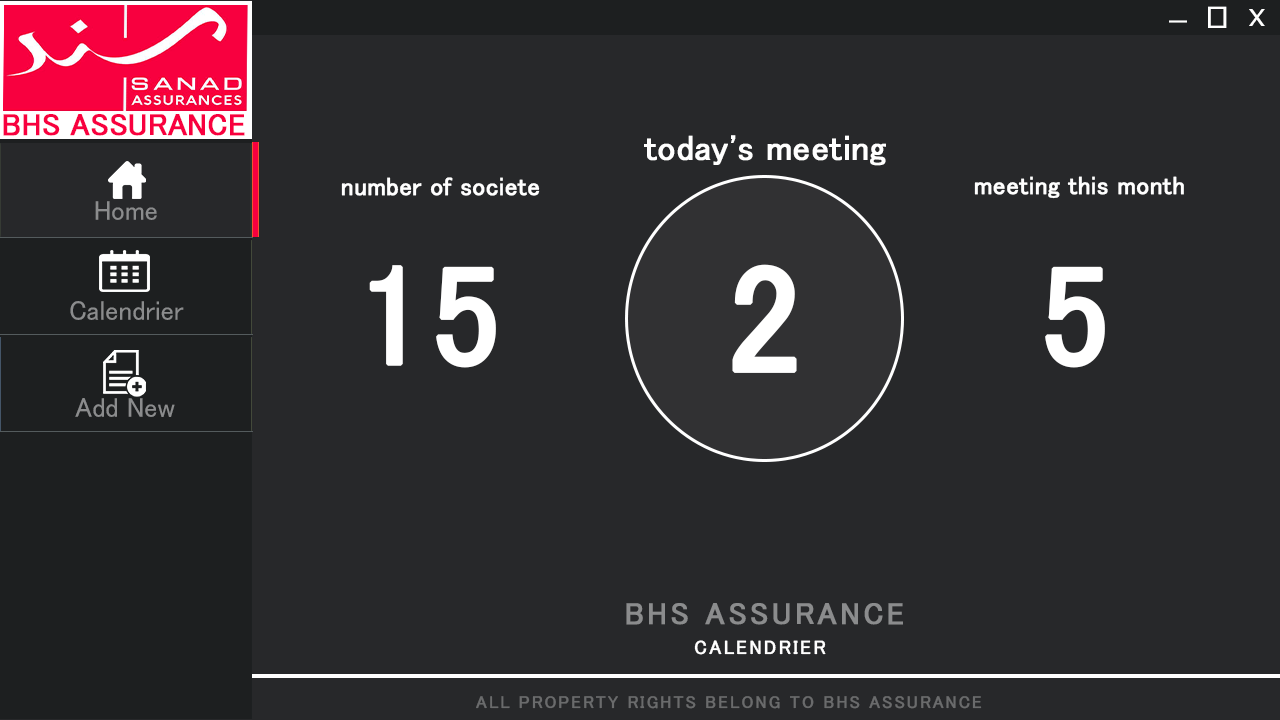
<style>
.page{position:relative;width:1280px;height:720px;background:#27282a}
.page>*{position:absolute;margin:0}
.t1{font:31px "HoloLensMDL2Assets";color:#ffffff;scale:1.21 1}
.t2{font:30px "Verdana";color:#ffffff}
.t3{font:30.6px "KozGoPr6N-Regular";color:#ffffff;font-weight:bold}
.t4{font:30.6px "MS-PGothic";color:#f8003f;font-weight:bold}
.t5{font:35.7px "MS-PGothic";color:#ffffff;font-weight:bold}
.t6{font:25.5px "MS-PGothic";color:#ffffff;font-weight:bold}
.t7{font:27.5px "MS-PGothic";color:#8b8c8d}
.t8{font:142.8px "MS-PGothic";color:#ffffff;font-weight:bold}
.t9{font:153px "MS-PGothic";color:#ffffff;font-weight:bold}
.t10{font:30.6px "MS-PGothic";letter-spacing:0.1em;color:#8b8c8d;font-weight:bold}
.t11{font:19.4px "MS-PGothic";letter-spacing:0.1em;color:#ffffff;text-transform:uppercase;font-weight:bold}
.t12{font:17.3px "MS-PGothic";letter-spacing:0.1em;color:#6a6b6c;text-transform:uppercase;font-weight:bold}
</style>
<div class="page">
<p class="t1" style="left:1208px;top:6px;width:19px;height:22px">f</p>
<p class="t2" style="left:1249px;top:9px;width:16px;height:17px">x</p>
<p class="t3" style="left:1169px;top:20px;width:18px;height:3px">_</p>
<p class="t4" style="left:3px;top:114px;width:242px;height:22px">BHS ASSURANCE</p>
<p class="t5" style="left:644px;top:135px;width:242px;height:31px">today's meeting</p>
<p class="t6" style="left:341px;top:177px;width:199px;height:19px">number of societe</p>
<p class="t6" style="left:974px;top:176px;width:210px;height:23px">meeting this month</p>
<p class="t7" style="left:95px;top:201px;width:62px;height:19px">Home</p>
<p class="t8" style="left:369px;top:265px;width:127px;height:103px">15</p>
<p class="t9" style="left:732px;top:264px;width:65px;height:109px">2</p>
<p class="t8" style="left:1045px;top:266px;width:60px;height:102px">5</p>
<p class="t7" style="left:70px;top:301px;width:114px;height:19px">Calendrier</p>
<p class="t7" style="left:75px;top:398px;width:100px;height:19px">Add New</p>
<p class="t10" style="left:626px;top:603px;width:277px;height:22px">BHS ASSURANCE</p>
<p class="t11" style="left:694px;top:640px;width:132px;height:15px">Calendrier</p>
<p class="t12" style="left:476px;top:696px;width:506px;height:13px">All property rights belong to BHS ASSURANCE</p>
</div>
